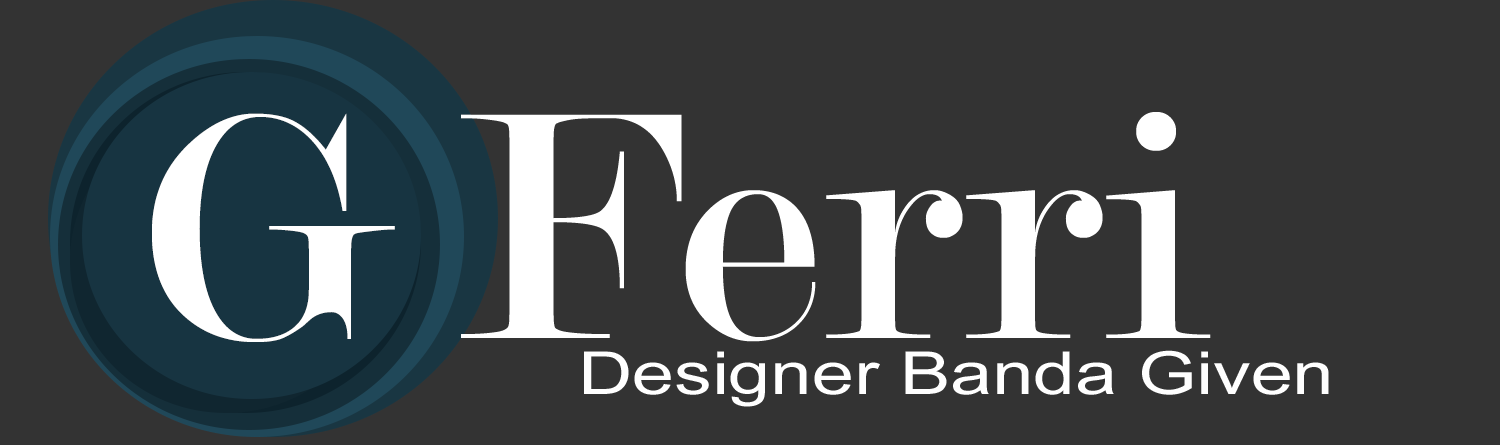
<style>
.page{position:relative;width:1500px;height:445px;background:#333333}
.page>*{position:absolute;margin:0}
.t1{font:345.4px "Modern-Regular";color:#ffffff;scale:1.06 1}
.t2{font:346.4px "Modern-Regular";color:#ffffff;scale:1.03 1}
.t3{font:59.2px "ArialMT";color:#ffffff;scale:1.27 1}
</style>
<div class="page">
<p class="t1" style="left:152px;top:113px;width:243px;height:229px">G</p>
<p class="t2" style="left:461px;top:112px;width:750px;height:230px">Ferri</p>
<p class="t3" style="left:584px;top:350px;width:745px;height:57px">Designer Banda Given</p>
</div>
